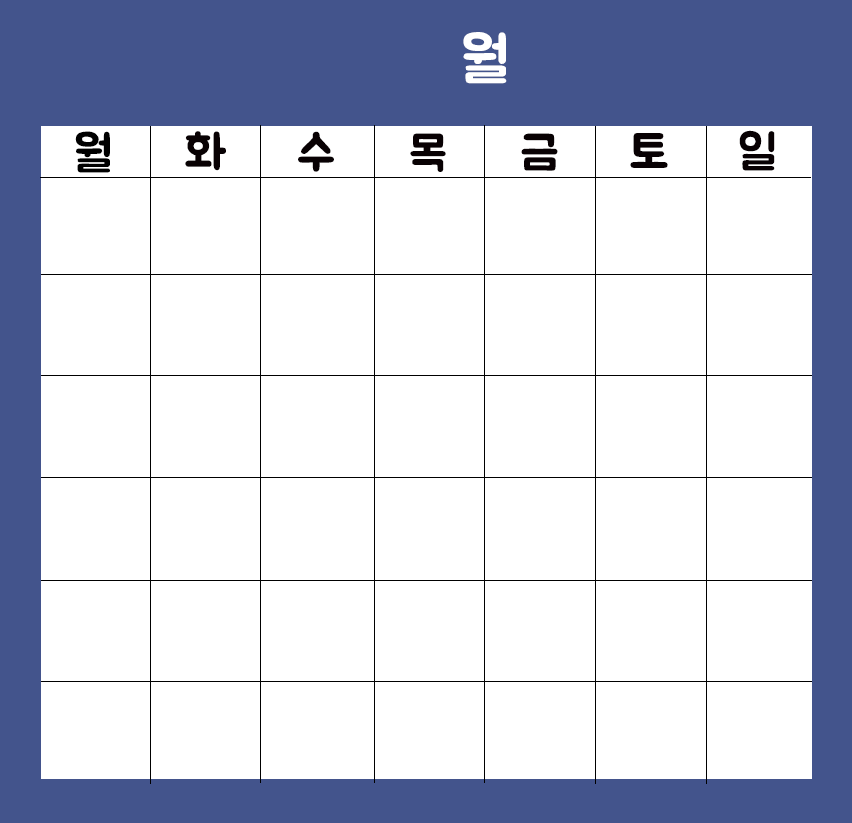
<style>
.page{position:relative;width:852px;height:823px;background:#ffffff}
.page>*{position:absolute;margin:0}
.t1{font:60px "BMJUA";color:#ffffff}
.t2{font:48px "BMJUA";color:#000000}
</style>
<div class="page">
<p class="t1" style="left:463px;top:32px;width:44px;height:52px">월</p>
<p class="t2" style="left:75px;top:131px;width:35px;height:42px">월</p>
<p class="t2" style="left:185px;top:131px;width:41px;height:40px">화</p>
<p class="t2" style="left:298px;top:131px;width:36px;height:41px">수</p>
<p class="t2" style="left:410px;top:133px;width:36px;height:39px">목</p>
<p class="t2" style="left:521px;top:133px;width:37px;height:38px">금</p>
<p class="t2" style="left:630px;top:133px;width:38px;height:35px">토</p>
<p class="t2" style="left:739px;top:130px;width:36px;height:41px">일</p>
</div>
